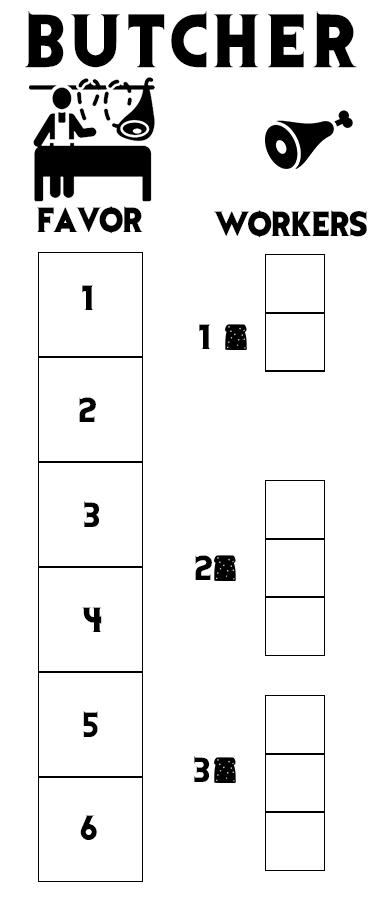
<style>
.page{position:relative;width:375px;height:900px;background:#ffffff}
.page>*{position:absolute;margin:0}
.t1{font:62.5px "EvilDead";letter-spacing:0.12em;color:#000000}
.t2{font:29.2px "EvilDead";color:#000000}
</style>
<div class="page">
<p class="t1" style="left:25px;top:11px;width:332px;height:57px">BUTCHER</p>
<p class="t2" style="left:37px;top:206px;width:106px;height:28px">FAVOR</p>
<p class="t2" style="left:213px;top:210px;width:154px;height:28px">WORKERS</p>
<p class="t2" style="left:82px;top:285px;width:12px;height:25px">1</p>
<p class="t2" style="left:199px;top:324px;width:12px;height:25px">1</p>
<p class="t2" style="left:79px;top:397px;width:17px;height:25px">2</p>
<p class="t2" style="left:84px;top:501px;width:15px;height:26px">3</p>
<p class="t2" style="left:195px;top:555px;width:17px;height:25px">2</p>
<p class="t2" style="left:82px;top:607px;width:20px;height:25px">4</p>
<p class="t2" style="left:83px;top:711px;width:15px;height:26px">5</p>
<p class="t2" style="left:194px;top:756px;width:15px;height:26px">3</p>
<p class="t2" style="left:80px;top:815px;width:17px;height:25px">6</p>
</div>
